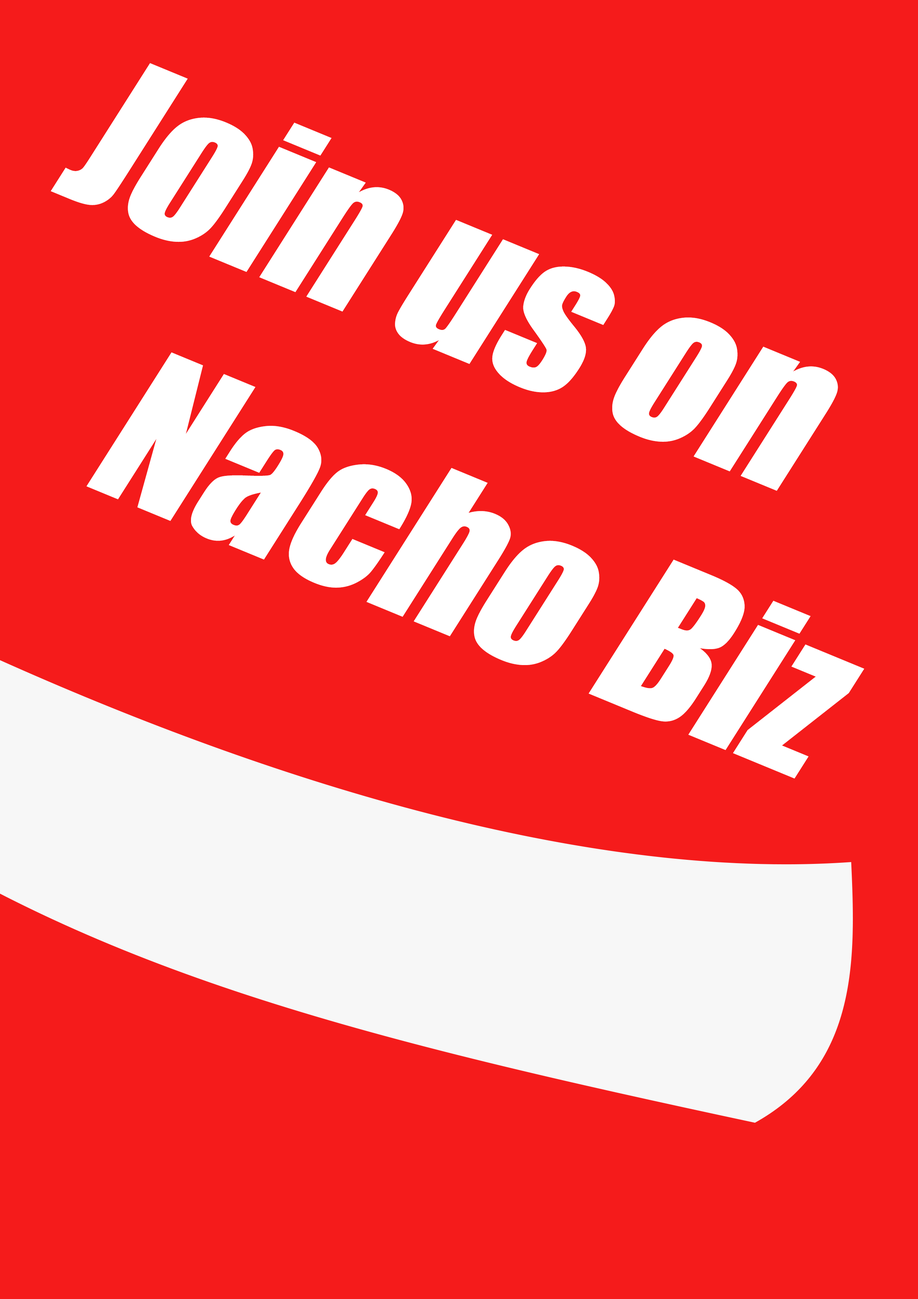
<style>
.page{position:relative;width:918px;height:1299px;background:#f51b1b}
.page>*{position:absolute;margin:0}
.t1{font:197.5px/18.5px "Impact";color:#ffffff;font-style:italic}
</style>
<div class="page">
<p class="t1" style="left:51px;top:63px;width:813px;height:716px;rotate:22deg">Join us on<br><br><br><br><br><br><br><br><br><br><br><br><br><br>    Nacho Biz</p>
</div>
